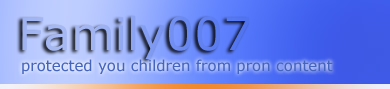
<style>
.page{position:relative;width:390px;height:89px}
.page>*{position:absolute;margin:0}
.t1{font:15px "MSReferenceSansSerif";color:#4464be}
</style>
<div class="page">
<p class="t1" style="left:22px;top:59px;width:311px;height:15px">protected you children from pron content</p>
</div>
